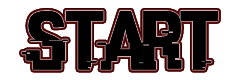
<style>
.page{position:relative;width:240px;height:80px;background:#ffffff}
.page>*{position:absolute;margin:0}
.t1{font:83.3px "HACKED";color:#000000;scale:1.08 1}
</style>
<div class="page">
<p class="t1" style="left:22px;top:11px;width:196px;height:59px">start</p>
<p class="t1" style="left:22px;top:11px;width:196px;height:59px">start</p>
<p class="t1" style="left:22px;top:11px;width:196px;height:59px">start</p>
</div>
